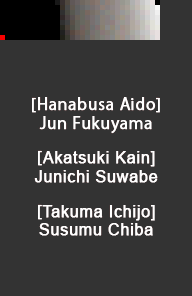
<style>
.page{position:relative;width:192px;height:296px;background:#333333}
.page>*{position:absolute;margin:0}
.t1{font:16px/18.7px "KozGoPr6N-Regular";letter-spacing:0.025em;color:#ffffff;font-weight:bold}
.t2{font:16px/18.7px "ArialMT";letter-spacing:0.025em;color:#ffffff;font-weight:bold}
</style>
<div class="page">
<p class="t1" style="left:32px;top:97px;width:128px;height:139px;text-align:center">[Hanabusa Aido]<br>Jun Fukuyama<br> <br>[<span class="t2">Akatsuki Kain]<br>Junichi Suwabe<br> <br></span>[<span class="t2">Takuma Ichijo]<br>Susumu Chiba</span></p>
</div>
